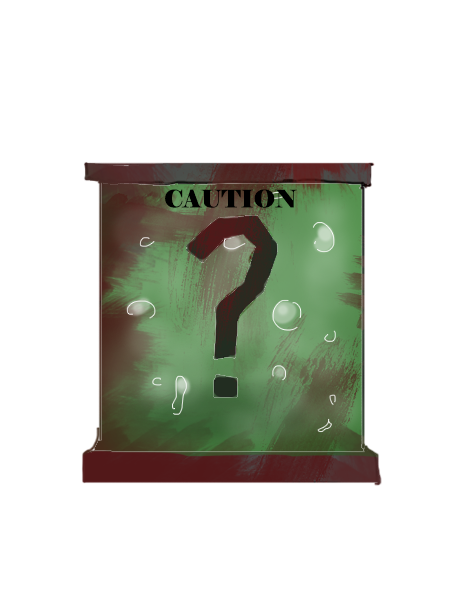
<style>
.page{position:relative;width:452px;height:610px;background:#ffffff}
.page>*{position:absolute;margin:0}
.t1{font:24px "Elephant-Regular";color:#000000}
</style>
<div class="page">
<p class="t1" style="left:165px;top:189px;width:132px;height:19px">CAUTION</p>
</div>
